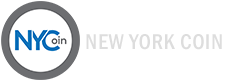
<style>
.page{position:relative;width:225px;height:80px;background:#ffffff}
.page>*{position:absolute;margin:0}
.t1{font:22px "FranklinGothic-MediumCond";letter-spacing:0.025em;color:#dddddd}
</style>
<div class="page">
<p class="t1" style="left:86px;top:34px;width:136px;height:16px">NEW YORK COIN</p>
</div>
